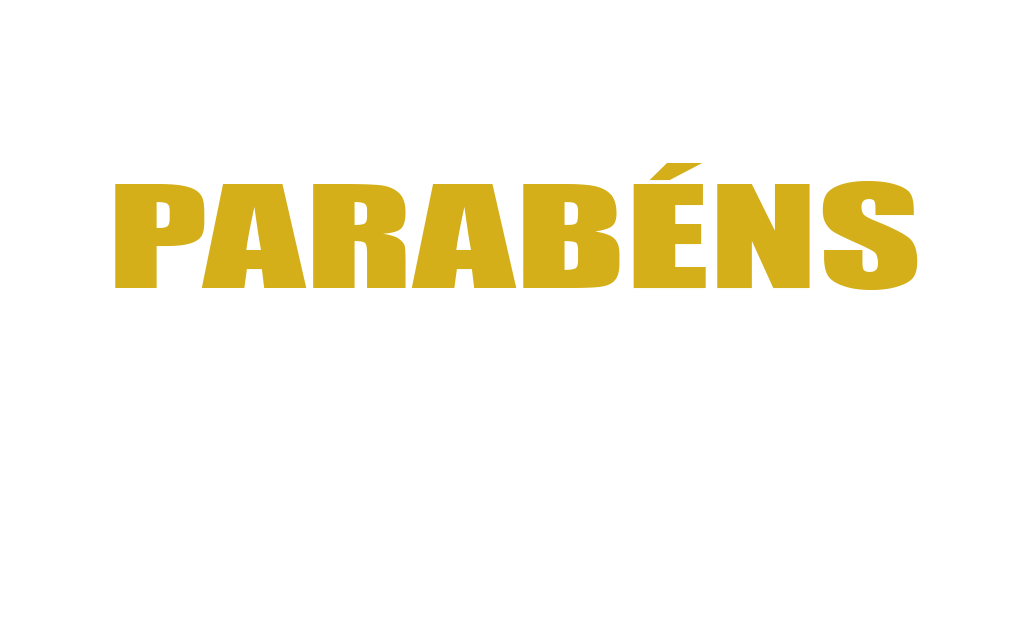
<style>
.page{position:relative;width:1025px;height:641px;background:#ffffff}
.page>*{position:absolute;margin:0}
.t1{font:226.4px "Impact";color:#d4af1a;font-variant:small-caps;scale:1.52 1}
.t2{font:169.8px "SegoeScript-Bold";color:#036c6f;font-variant:small-caps;scale:1.52 1}
</style>
<div class="page">
<p class="t1" style="left:115px;top:163px;width:803px;height:127px"><span class="t2">    </span>PARABÉNS</p>
</div>
